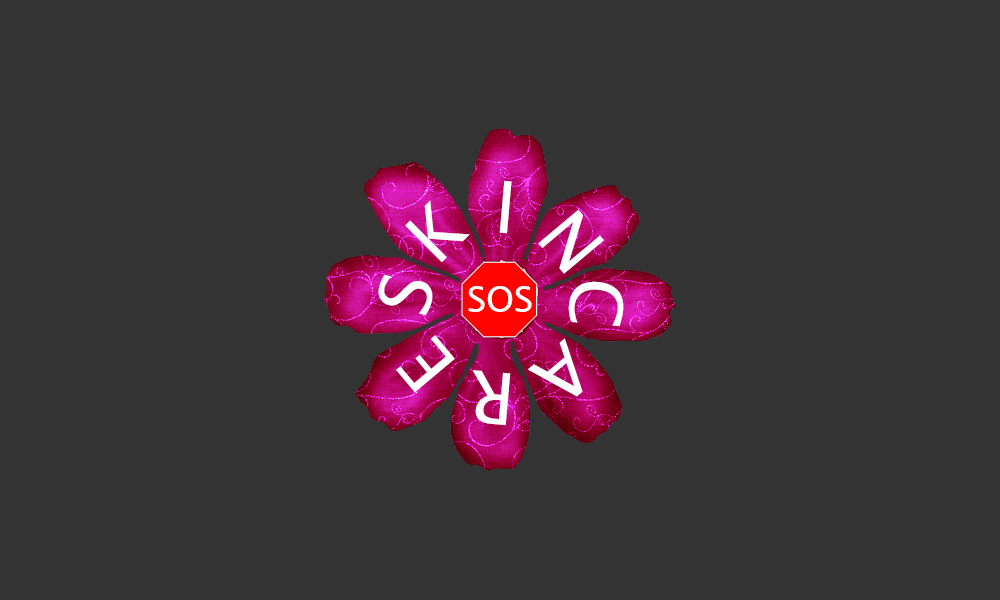
<style>
.page{position:relative;width:1000px;height:600px;background:#333333}
.page>*{position:absolute;margin:0}
.t1{font:72px "LucidaSansUnicode";color:#ffffff}
.t2{font:36px "LucidaSansUnicode";color:#ffffff}
</style>
<div class="page">
<p class="t1" style="left:499px;top:180px;width:13px;height:54px;rotate:5deg">I</p>
<p class="t1" style="left:405px;top:200px;width:65px;height:63px;rotate:-45deg">K</p>
<p class="t1" style="left:538px;top:209px;width:66px;height:65px;rotate:50deg">N</p>
<p class="t1" style="left:378px;top:274px;width:55px;height:42px;rotate:-75deg">S</p>
<p class="t1" style="left:568px;top:281px;width:56px;height:46px;rotate:95deg">C</p>
<p class="t2" style="left:468px;top:286px;width:64px;height:26px">SOS</p>
<p class="t1" style="left:396px;top:335px;width:59px;height:58px;rotate:-130deg">E</p>
<p class="t1" style="left:527px;top:338px;width:56px;height:59px;rotate:140deg">A</p>
<p class="t1" style="left:472px;top:370px;width:39px;height:56px;rotate:-175deg">R</p>
</div>
